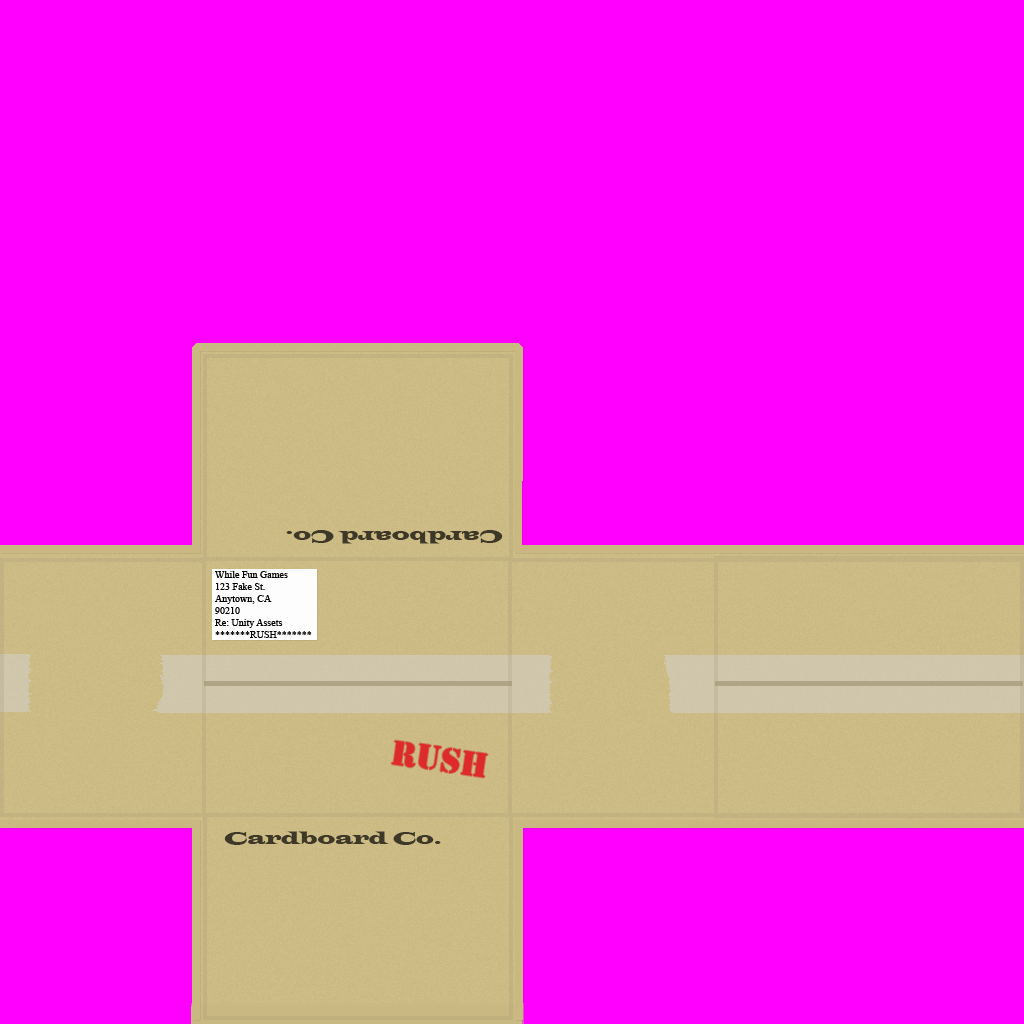
<style>
.page{position:relative;width:1024px;height:1024px;background:#ff00ff}
.page>*{position:absolute;margin:0}
.t1{font:18px "LatinWide";color:#3d3828}
.t2{font:10px "TimesNewRomanPSMT";color:#000000}
.t3{font:36px "Stencil";color:#de2a2a}
</style>
<div class="page">
<p class="t1" style="left:286px;top:530px;width:217px;height:14px;rotate:-180deg">Cardboard Co.</p>
<p class="t2" style="left:215px;top:571px;width:97px;height:67px">While Fun Games<br>123 Fake St.<br>Anytown, CA<br>90210<br>Re: Unity Assets<br>*******RUSH*******</p>
<p class="t3" style="left:391px;top:740px;width:97px;height:38px;rotate:8deg">RUSH</p>
<p class="t1" style="left:224px;top:831px;width:217px;height:14px">Cardboard Co.</p>
</div>
